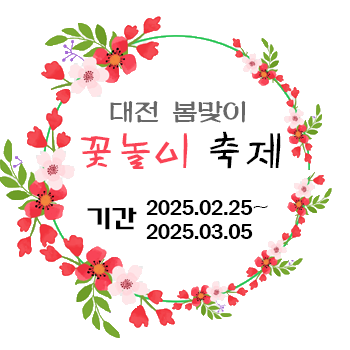
<style>
.page{position:relative;width:350px;height:350px;background:#ffffff}
.page>*{position:absolute;margin:0}
.t1{font:26px "MDArt";letter-spacing:-0.03em;color:#676767}
.t2{font:40px "HYsnrL";letter-spacing:-0.03em;color:#fa4355}
.t3{font:40px "HYsnrL";letter-spacing:-0.03em;color:#000000}
.t4{font:26px "HYsupB";letter-spacing:-0.03em;color:#000000}
.t5{font:20px/24px "HYsupB";letter-spacing:-0.03em;color:#000000}
</style>
<div class="page">
<p class="t1" style="left:110px;top:100px;width:136px;height:23px">대전 봄맟이</p>
<p class="t2" style="left:80px;top:131px;width:201px;height:38px">꽃놀이 <span class="t3">축제</span></p>
<p class="t4" style="left:87px;top:207px;width:50px;height:23px">기간</p>
<p class="t5" style="left:146px;top:200px;width:122px;height:39px">2025.02.25~<br>2025.03.05</p>
</div>
